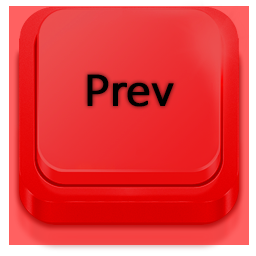
<style>
.page{position:relative;width:256px;height:256px}
.page>*{position:absolute;margin:0}
.t1{font:40.7px "NanumBarunGothic";letter-spacing:0.015em;color:#000000;font-weight:bold}
</style>
<div class="page">
<p class="t1" style="left:87px;top:74px;width:87px;height:33px">Prev</p>
</div>
